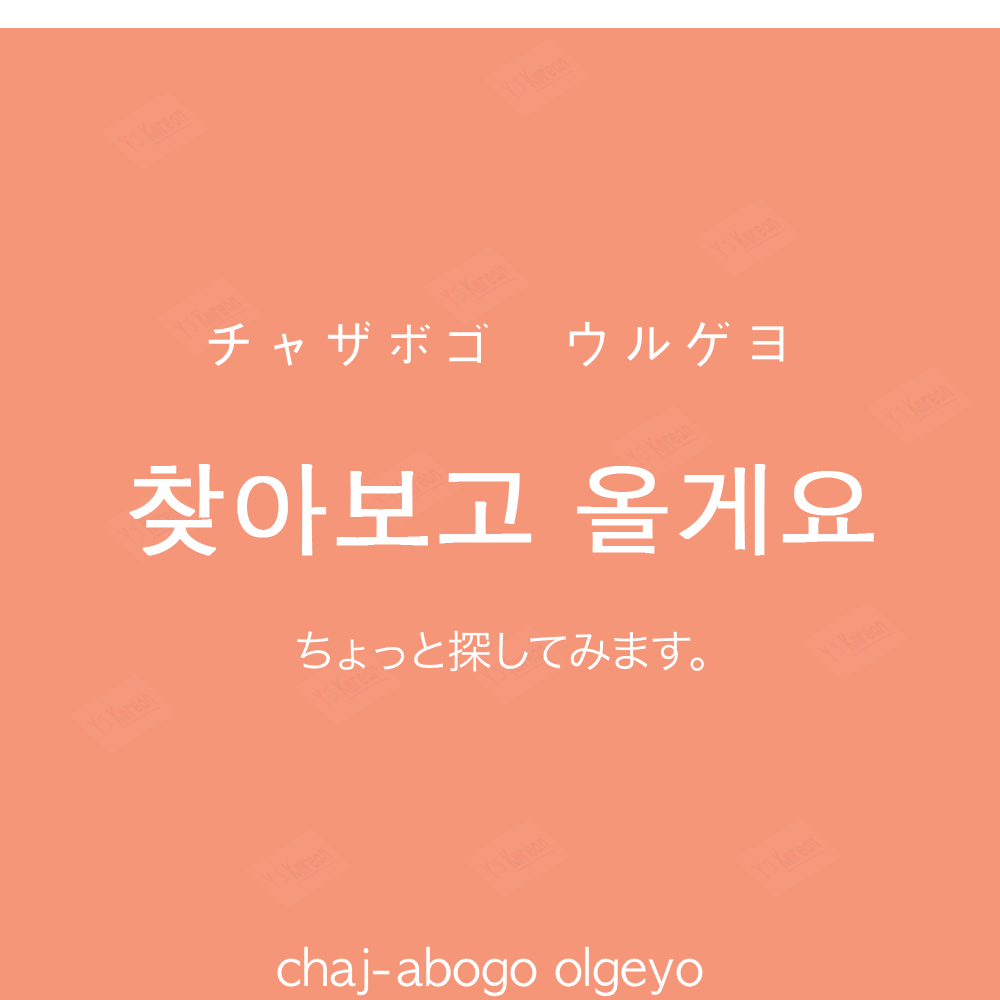
<style>
.page{position:relative;width:1000px;height:1000px;background:#f69679}
.page>*{position:absolute;margin:0}
.t1{font:60px "AppleGothic";color:#ffffff}
.t2{font:100px "AppleGothic";color:#ffffff;font-weight:bold}
.t3{font:45px "HiraKakuProN-W3";color:#ffffff}
.t4{font:50px "AppleGothic";color:#ffffff}
</style>
<div class="page">
<p class="t1" style="left:208px;top:321px;width:576px;height:46px">チャザボゴ　ウルゲヨ</p>
<p class="t2" style="left:129px;top:464px;width:745px;height:92px">찾아보고 올게요</p>
<p class="t3" style="left:297px;top:630px;width:407px;height:42px">ちょっと探してみます。</p>
<p class="t4" style="left:277px;top:946px;width:426px;height:51px">chaj-abogo olgeyo</p>
</div>
